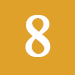
<style>
.page{position:relative;width:75px;height:75px;background:#e0a12a}
.page>*{position:absolute;margin:0}
.t1{font:60px "TimesNewRomanPSMT";color:#ffffff;font-weight:bold}
</style>
<div class="page">
<p class="t1" style="left:25px;top:15px;width:26px;height:42px">8</p>
</div>
